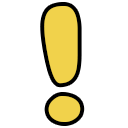
<style>
.page{position:relative;width:128px;height:128px;background:#ffffff}
.page>*{position:absolute;margin:0}
.t1{font:131.1px "Sweetascandy";color:#f1d24b;scale:0.8 1}
</style>
<div class="page">
<p class="t1" style="left:44px;top:6px;width:37px;height:116px">!</p>
</div>
